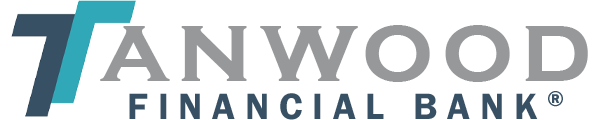
<style>
.page{position:relative;width:593px;height:120px;background:#ffffff}
.page>*{position:absolute;margin:0}
.t1{font:100px "CopperplateGothic-Bold";letter-spacing:0.08em;color:#96989a}
.t2{font:37.9px "FranklinGothic-Demi";letter-spacing:0.26em;color:#375064;text-transform:uppercase}
</style>
<div class="page">
<p class="t1" style="left:100px;top:25px;width:488px;height:57px">anwood</p>
<p class="t2" style="left:129px;top:91px;width:434px;height:29px">financial bank®</p>
</div>
